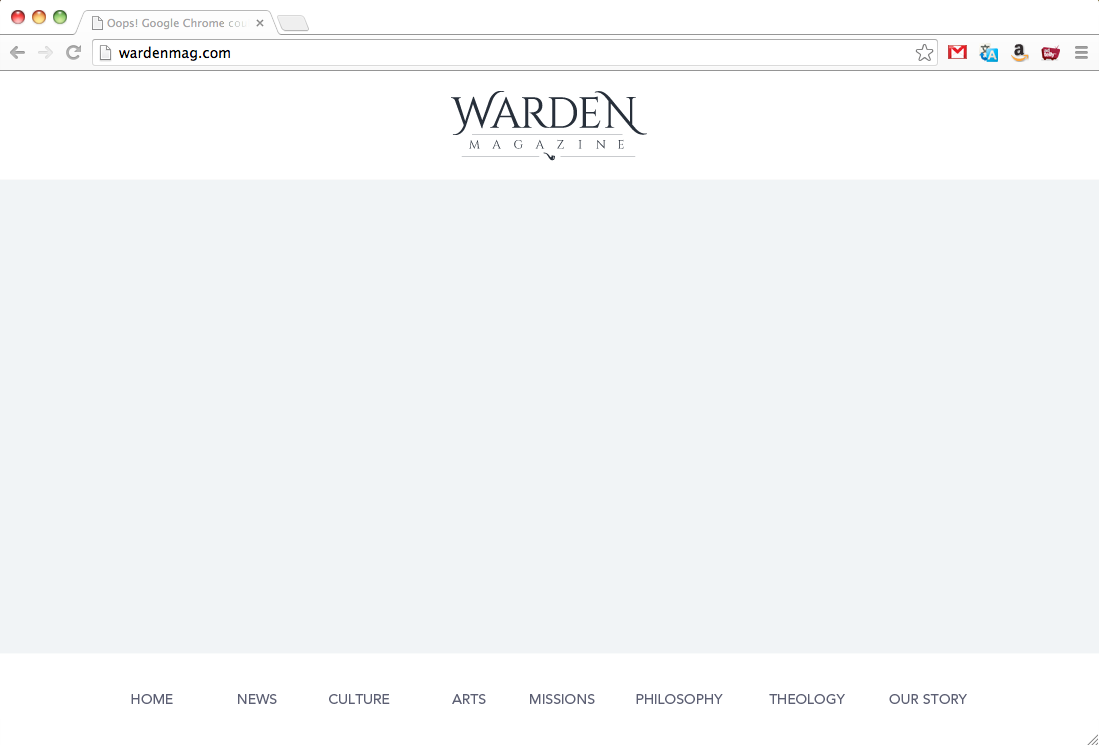
<style>
.page{position:relative;width:1099px;height:745px;background:#f1f4f6}
.page>*{position:absolute;margin:0}
.t1{font:14px "Avenir-Roman";color:#5c5f73}
</style>
<div class="page">
<p class="t1" style="left:131px;top:694px;width:42px;height:10px">HOME</p>
<p class="t1" style="left:238px;top:694px;width:39px;height:10px">NEWS</p>
<p class="t1" style="left:329px;top:694px;width:61px;height:10px">CULTURE</p>
<p class="t1" style="left:452px;top:694px;width:34px;height:10px">ARTS</p>
<p class="t1" style="left:530px;top:694px;width:65px;height:10px">MISSIONS</p>
<p class="t1" style="left:636px;top:694px;width:87px;height:10px">PHILOSOPHY</p>
<p class="t1" style="left:769px;top:694px;width:76px;height:10px">THEOLOGY</p>
<p class="t1" style="left:889px;top:694px;width:78px;height:10px">OUR STORY</p>
</div>
